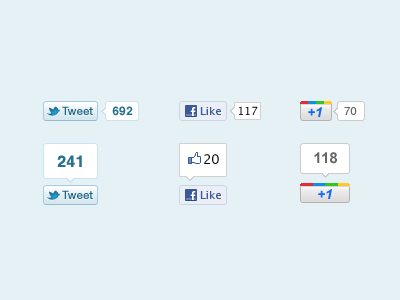
<style>
.page{position:relative;width:400px;height:300px;background:#e6f1f5}
.page>*{position:absolute;margin:0}
.t1{font:11.5px "HelveticaNeue-Medium";color:#186487}
.t2{font:12px "Helvetica-Bold";letter-spacing:0.015em;color:#2a7090}
.t3{font:10.5px "LucidaGrande";letter-spacing:0.02em;color:#3b5998}
.t4{font:11px "LucidaGrande";letter-spacing:-0.01em}
.t5{font:14px "Arial-BoldItalicMT";color:#166aee}
.t6{font:11px "Helvetica";letter-spacing:0.015em;color:#666666}
.t7{font:16px "Helvetica-Bold";letter-spacing:0.015em;color:#2a7090}
.t8{font:13px "LucidaGrande";letter-spacing:-0.01em;color:#000000}
.t9{font:15px "Arial-BoldMT";letter-spacing:0.015em;color:#666666}
</style>
<div class="page">
<p class="t1" style="left:62px;top:106px;width:31px;height:9px">Tweet</p>
<p class="t2" style="left:112px;top:106px;width:21px;height:10px">692</p>
<p class="t3" style="left:200px;top:107px;width:21px;height:8px">Like</p>
<p class="t4" style="left:239px;top:106px;width:19px;height:9px">117</p>
<p class="t5" style="left:308px;top:108px;width:7px;height:8px">+</p>
<p class="t5" style="left:316px;top:107px;width:6px;height:10px">1</p>
<p class="t6" style="left:344px;top:107px;width:13px;height:8px">70</p>
<p class="t7" style="left:57px;top:155px;width:25px;height:12px">241</p>
<p class="t8" style="left:204px;top:154px;width:15px;height:10px">20</p>
<p class="t9" style="left:314px;top:152px;width:23px;height:12px">118</p>
<p class="t1" style="left:62px;top:190px;width:31px;height:9px">Tweet</p>
<p class="t3" style="left:200px;top:191px;width:21px;height:8px">Like</p>
<p class="t5" style="left:318px;top:190px;width:7px;height:8px">+</p>
<p class="t5" style="left:326px;top:189px;width:6px;height:10px">1</p>
</div>
